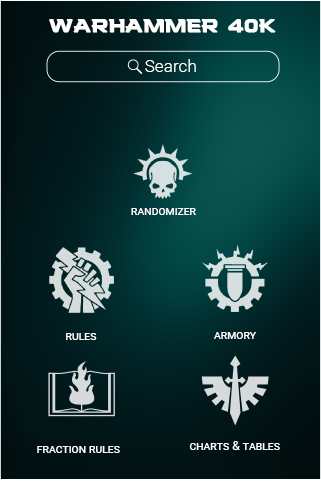
<style>
.page{position:relative;width:321px;height:481px}
.page>*{position:absolute;margin:0}
.t1{font:18.3px "Denzel";color:#ffffff;font-weight:bold}
.t2{font:17.2px "Roboto-Light";color:#ffffff}
.t3{font:12.1px "Roboto-Regular";color:#ffffff;font-variant:small-caps}
</style>
<div class="page">
<p class="t1" style="left:49px;top:19px;width:227px;height:14px">Warhammer 40k</p>
<p class="t2" style="left:145px;top:59px;width:51px;height:13px">Search</p>
<p class="t3" style="left:131px;top:208px;width:65px;height:7px">randomizer</p>
<p class="t3" style="left:66px;top:333px;width:31px;height:7px">rules</p>
<p class="t3" style="left:214px;top:332px;width:42px;height:7px">armory</p>
<p class="t3" style="left:37px;top:446px;width:83px;height:7px">fraction rules</p>
<p class="t3" style="left:189px;top:441px;width:91px;height:9px">charts &amp; tables</p>
</div>
